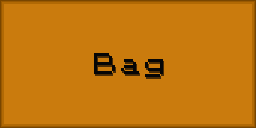
<style>
.page{position:relative;width:256px;height:128px;background:#ca7b0d}
.page>*{position:absolute;margin:0}
.t1{font:24px "PokemonGB";color:#060606}
</style>
<div class="page">
<p class="t1" style="left:94px;top:53px;width:69px;height:24px">Bag</p>
</div>
